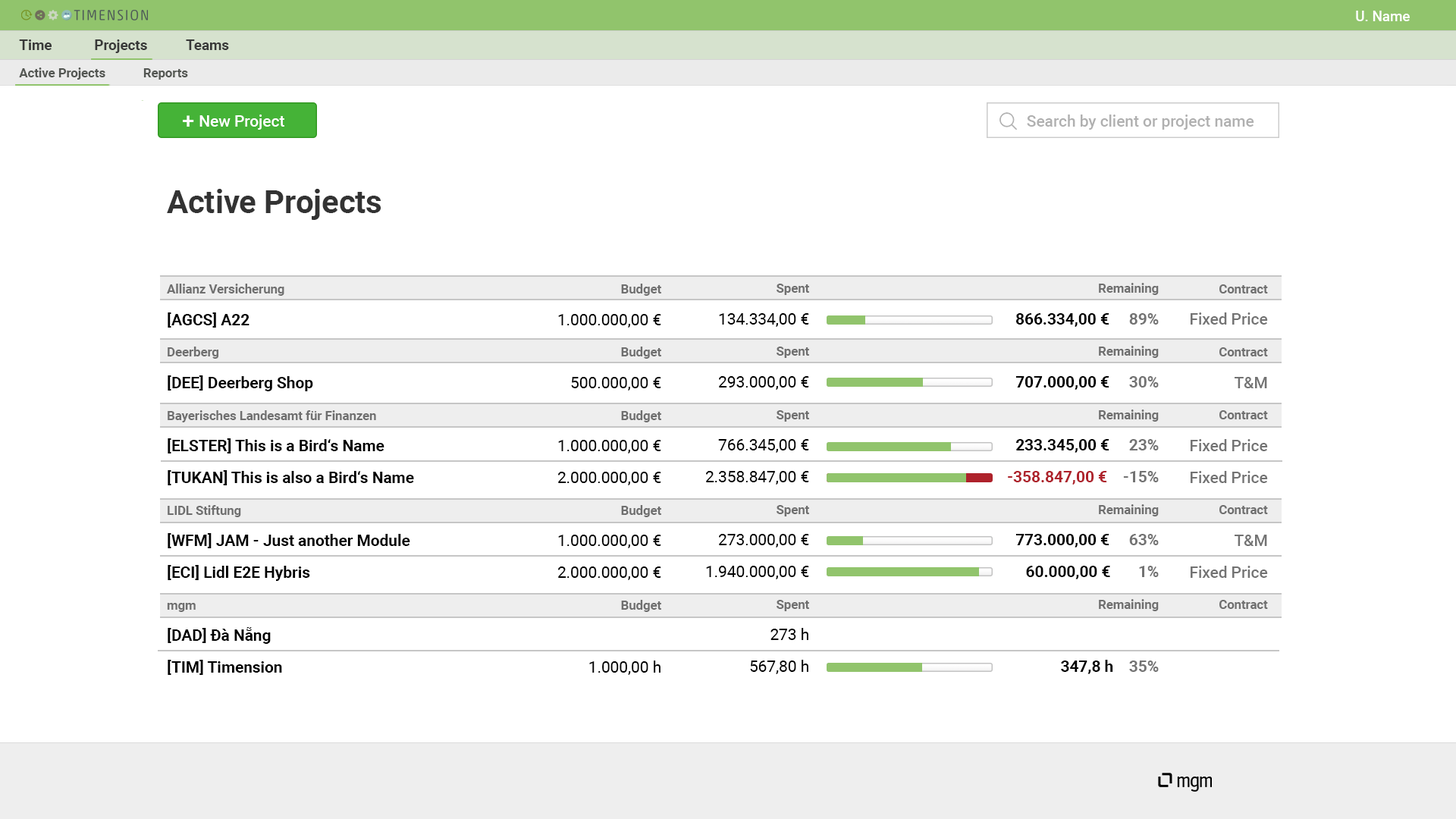
<style>
.page{position:relative;width:1456px;height:819px;background:#ffffff}
.page>*{position:absolute;margin:0}
.t1{font:14.2px "Roboto-Medium";color:#ffffff}
.t2{font:14.2px "Roboto-Bold";color:#383938}
.t3{font:12.6px "Roboto-Bold";color:#535652}
.t4{font:15.8px "Roboto-Medium";color:#ffffff}
.t5{font:22.1px "Roboto-Medium";color:#ffffff}
.t6{font:15.8px "Roboto-Medium";color:#b0b0b0}
.t7{font:31.6px "Roboto-Bold";color:#333333}
.t8{font:15.8px/31.6px "Roboto-Bold";color:#000000}
.t9{font:12.6px/31.6px "Roboto-Bold";color:#6f6f6f}
.t10{font:15.8px/31.6px "Roboto-Regular";color:#000000}
.t11{font:15.8px/31.6px "Roboto-Bold";color:#ae222b}
.t12{font:15.8px/31.6px "Roboto-Bold";color:#737373}
.t13{font:15.8px/31.6px "Roboto-Medium";color:#737373}
</style>
<div class="page">
<p class="t1" style="left:1356px;top:11px;width:54px;height:10px">U. Name</p>
<p class="t2" style="left:19px;top:39px;width:210px;height:14px">Time            Projects           Teams</p>
<p class="t3" style="left:19px;top:67px;width:169px;height:13px">Active Projects            Reports</p>
<p class="t4" style="left:183px;top:115px;width:101px;height:15px"><span class="t5">+ </span>New Project</p>
<p class="t6" style="left:1027px;top:115px;width:227px;height:15px">Search by client or project name</p>
<p class="t7" style="left:167px;top:189px;width:214px;height:31px">Active Projects</p>
<p class="t8" style="left:167px;top:284px;width:247px;height:391px"><span class="t9">Allianz Versicherung<br></span>[AGCS] A22<br><span class="t9">Deerberg<br></span>[DEE] Deerberg Shop<br><span class="t9">Bayerisches Landesamt für Finanzen<br></span>[ELSTER] This is a Bird‘s Name<br>[TUKAN] This is also a Bird‘s Name<br><span class="t9">LIDL Stiftung<br></span>[WFM] JAM - Just another Module<br>[ECI] Lidl E2E Hybris<br><span class="t9">mgm <br></span>[DAD] Đà Nẵng <br>[TIM] Timension</p>
<p class="t10" style="left:558px;top:284px;width:103px;height:391px;text-align:right"><span class="t9">Budget<br></span>1.000.000,00 €<br><span class="t9">Budget<br></span>500.000,00 €<br><span class="t9">Budget<br></span>1.000.000,00 €<br>2.000.000,00 €<br><span class="t9">Budget<br></span>1.000.000,00 €<br>2.000.000,00 €<br><span class="t9">Budget<br><br></span>1.000,00 h</p>
<p class="t10" style="left:706px;top:284px;width:103px;height:390px;text-align:right"><span class="t9">Spent<br></span>134.334,00 €<br><span class="t9">Spent<br></span>293.000,00 €<br><span class="t9">Spent<br></span>766.345,00 €<br>2.358.847,00 €<br><span class="t9">Spent<br></span>273.000,00 €<br>1.940.000,00 €<br><span class="t9">Spent<br></span>273 h<br>567,80 h</p>
<p class="t11" style="left:1008px;top:283px;width:151px;height:391px;text-align:right"><span class="t9">Remaining<br></span><span class="t8">866.334,00 €     </span><span class="t12">89%<br></span><span class="t9">Remaining<br></span><span class="t8">707.000,00 €     </span><span class="t12">30%<br></span><span class="t9">Remaining<br></span><span class="t8">233.345,00 €     </span><span class="t12">23%<br></span>-358.847,00 €    <span class="t12">-15%<br></span><span class="t9">Remaining<br></span><span class="t8">773.000,00 €     </span><span class="t12">63%<br></span><span class="t8">60.000,00 €</span><span class="t12">       1%<br></span><span class="t9">Remaining<br>            <br></span><span class="t8">347,8 h    </span><span class="t12">35%</span></p>
<p class="t13" style="left:1191px;top:284px;width:77px;height:325px;text-align:right"><span class="t9">Contract<br></span>Fixed Price<br><span class="t9">Contract<br></span>T&amp;M<br><span class="t9">Contract<br></span>Fixed Price<br>Fixed Price<br><span class="t9">Contract<br></span>T&amp;M<br>Fixed Price<br><span class="t9">Contract</span></p>
</div>
